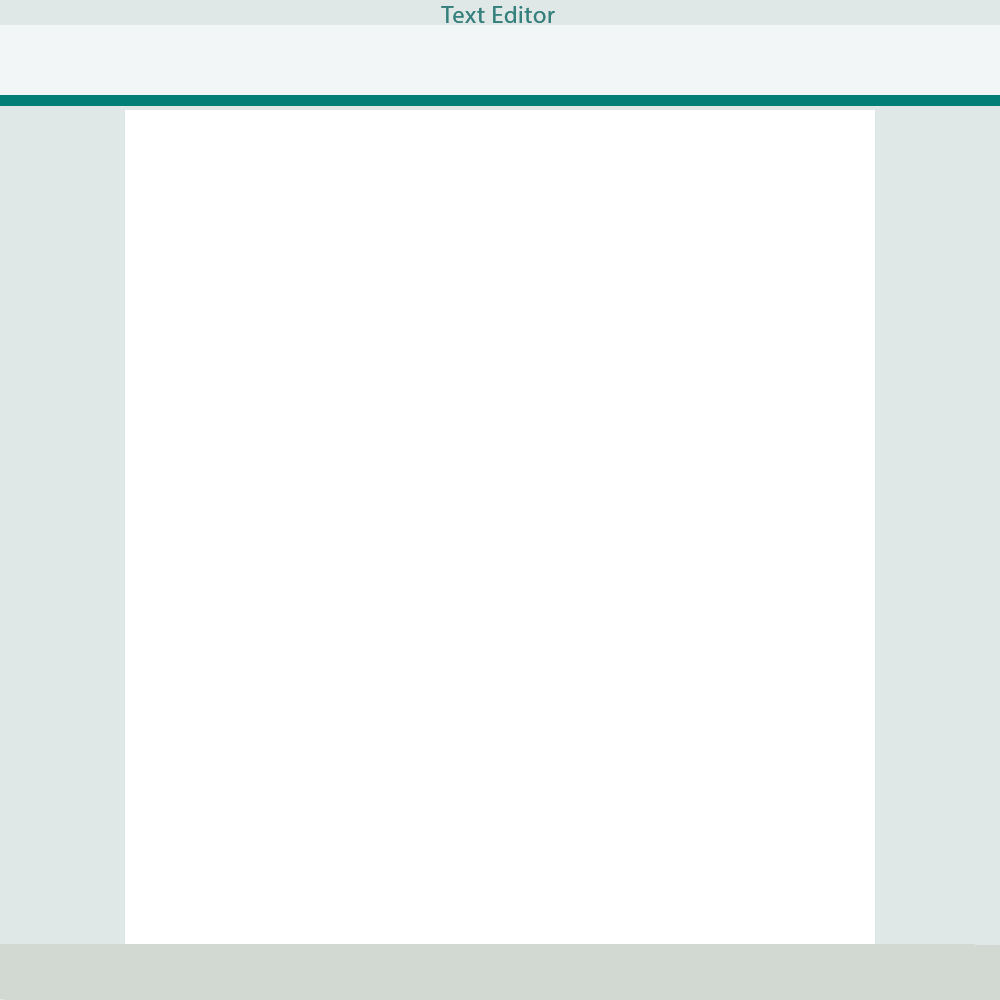
<style>
.page{position:relative;width:1000px;height:1000px;background:#ffffff}
.page>*{position:absolute;margin:0}
.t1{font:24px "MyriadPro-Regular";letter-spacing:0.03em;color:#357f7c}
</style>
<div class="page">
<p class="t1" style="left:441px;top:6px;width:114px;height:17px">Text Editor</p>
</div>
